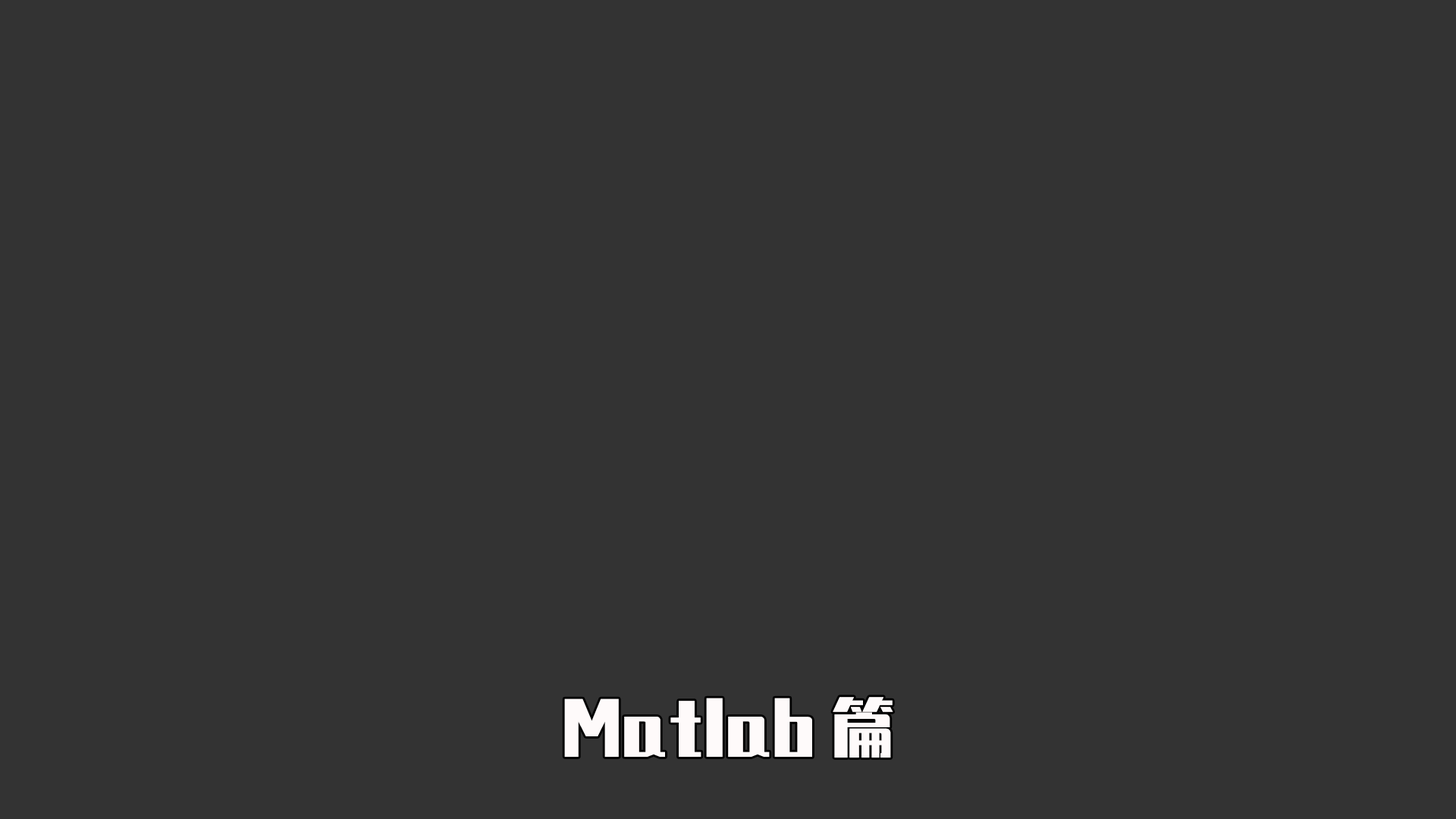
<style>
.page{position:relative;width:1456px;height:819px;background:#333333}
.page>*{position:absolute;margin:0}
.t1{font:63.2px "ZhenyanGB-Regular";color:#fefafa}
</style>
<div class="page">
<p class="t1" style="left:564px;top:697px;width:329px;height:61px">Matlab篇</p>
</div>
